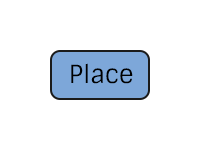
<style>
.page{position:relative;width:200px;height:150px;background:#ffffff}
.page>*{position:absolute;margin:0}
.t1{font:25px "Sintony";color:#000000}
</style>
<div class="page">
<p class="t1" style="left:71px;top:63px;width:62px;height:21px">Place</p>
</div>
